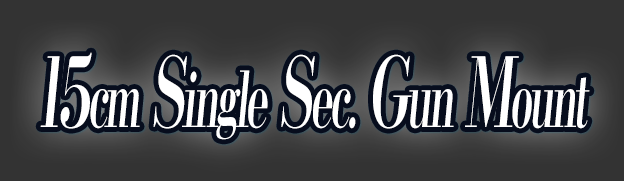
<style>
.page{position:relative;width:624px;height:181px;background:#333333}
.page>*{position:absolute;margin:0}
.t1{font:76.8px "KochoStd-Heavy";letter-spacing:-0.08em;color:#ffffff;font-style:italic;scale:0.54 1}
.t2{font:96px "KochoStd-Heavy";letter-spacing:-0.08em;color:#ffffff;font-style:italic;scale:0.54 1}
</style>
<div class="page">
<p class="t1" style="left:40px;top:52px;width:550px;height:88px"><span class="t2">15</span>cm<span class="t2"> S</span>ingle<span class="t2"> S</span>ec.<span class="t2"> G</span>un<span class="t2"> M</span>ount</p>
</div>
